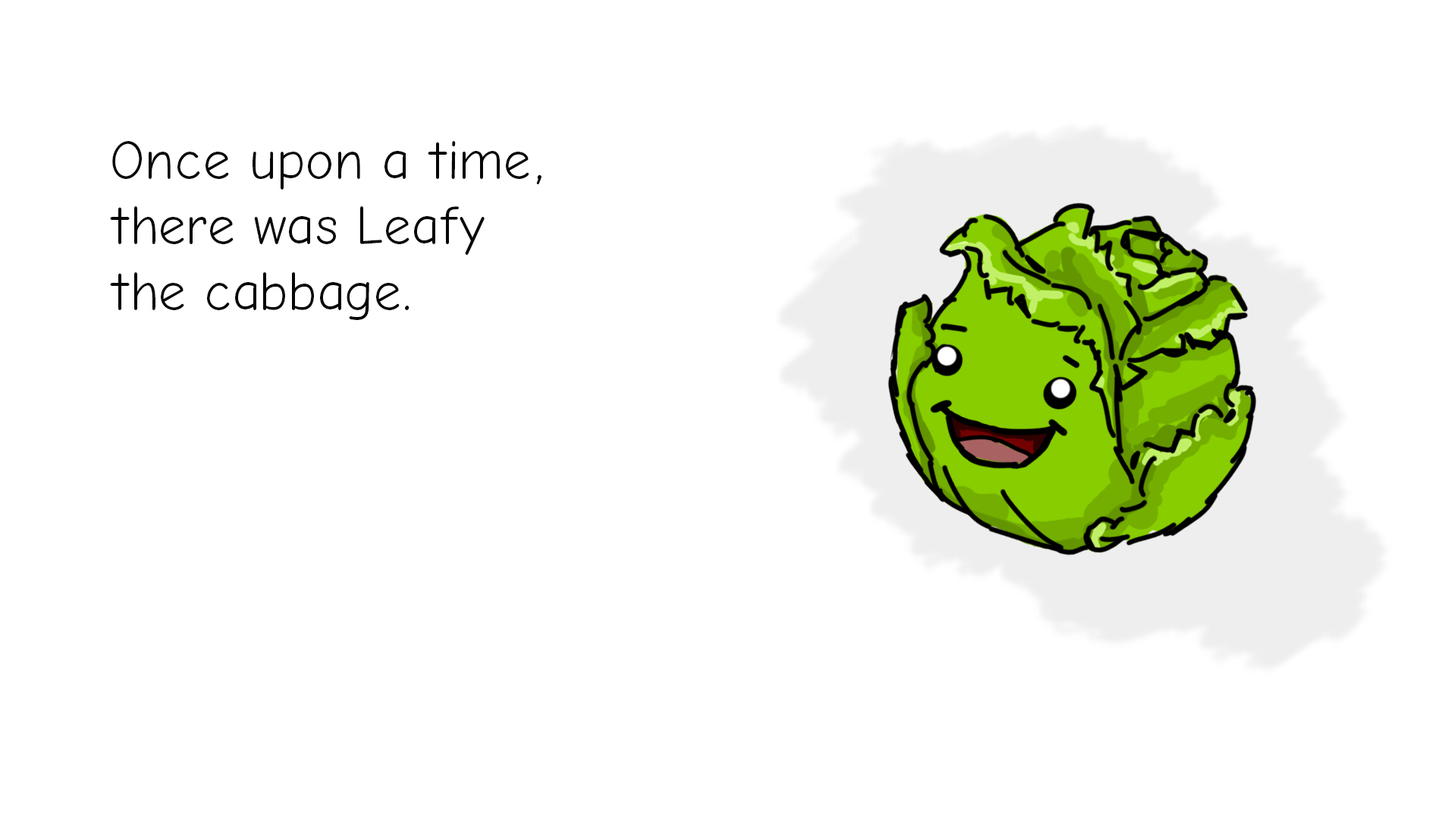
<style>
.page{position:relative;width:1456px;height:819px;background:#ffffff}
.page>*{position:absolute;margin:0}
.t1{font:54.6px "ComicNeue";color:#070707}
</style>
<div class="page">
<p class="t1" style="left:110px;top:141px;width:431px;height:179px">Once upon a time,<br>there was Leafy<br>the cabbage.</p>
</div>
